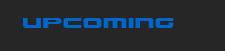
<style>
.page{position:relative;width:225px;height:51px;background:#262626}
.page>*{position:absolute;margin:0}
.t1{font:15.8px "Gunship";color:#0066cc;scale:1.22 1}
</style>
<div class="page">
<p class="t1" style="left:23px;top:18px;width:151px;height:10px">Upcoming</p>
</div>
